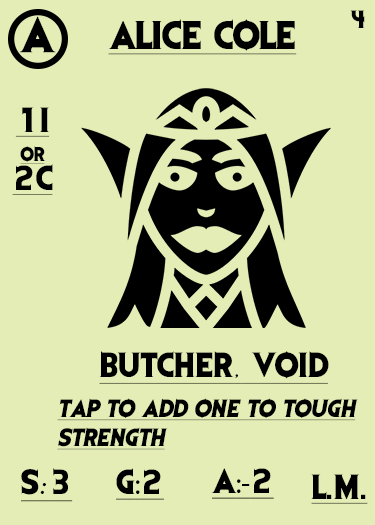
<style>
.page{position:relative;width:375px;height:525px;background:#e3edb5}
.page>*{position:absolute;margin:0}
.t1{font:41.7px "EvilDead";letter-spacing:-0.05em;color:#000000}
.t2{font:20.8px "EvilDead";letter-spacing:-0.05em;color:#000000}
.t3{font:33.3px "EvilDead";color:#000000;text-decoration:underline}
.t4{font:29.2px/29.2px "EvilDead";color:#000000;text-decoration:underline}
.t5{font:16.7px/29.2px "EvilDead";color:#000000;text-decoration:underline}
.t6{font:29.2px "EvilDead";color:#000000;text-decoration:underline}
.t7{font:29.2px "Fadli-Script";color:#000000;text-decoration:underline}
.t8{font:20.8px/29.2px "EvilDead";color:#000000;font-style:italic;text-decoration:underline}
.t9{font:29.2px "MyriadPro-Regular";color:#000000;text-decoration:underline}
</style>
<div class="page">
<p class="t1" style="left:19px;top:16px;width:37px;height:37px">A</p>
<p class="t2" style="left:350px;top:10px;width:15px;height:18px">4</p>
<p class="t3" style="left:108px;top:19px;width:189px;height:36px">ALICE COLE</p>
<p class="t4" style="left:12px;top:107px;width:41px;height:88px;text-align:center">1I<br><span class="t5">or<br></span>2C</p>
<p class="t6" style="left:99px;top:351px;width:230px;height:33px">BUTCHER<span class="t7">,</span> VOID</p>
<p class="t8" style="left:57px;top:398px;width:301px;height:52px">Tap to add one to tough<br>strength</p>
<p class="t6" style="left:21px;top:468px;width:52px;height:34px">S<span class="t7">:</span>3</p>
<p class="t6" style="left:116px;top:468px;width:49px;height:32px">G<span class="t9">:</span>2</p>
<p class="t9" style="left:211px;top:468px;width:63px;height:31px"><span class="t6">A</span>:-<span class="t6">2</span></p>
<p class="t6" style="left:311px;top:474px;width:57px;height:30px">L.M.</p>
</div>
